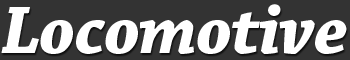
<style>
.page{position:relative;width:350px;height:60px;background:#333333}
.page>*{position:absolute;margin:0}
.t1{font:72px "ChaparralPro-BoldIt";letter-spacing:-0.025em;color:#ffffff}
</style>
<div class="page">
<p class="t1" style="left:1px;top:4px;width:346px;height:50px">Locomotive</p>
</div>
